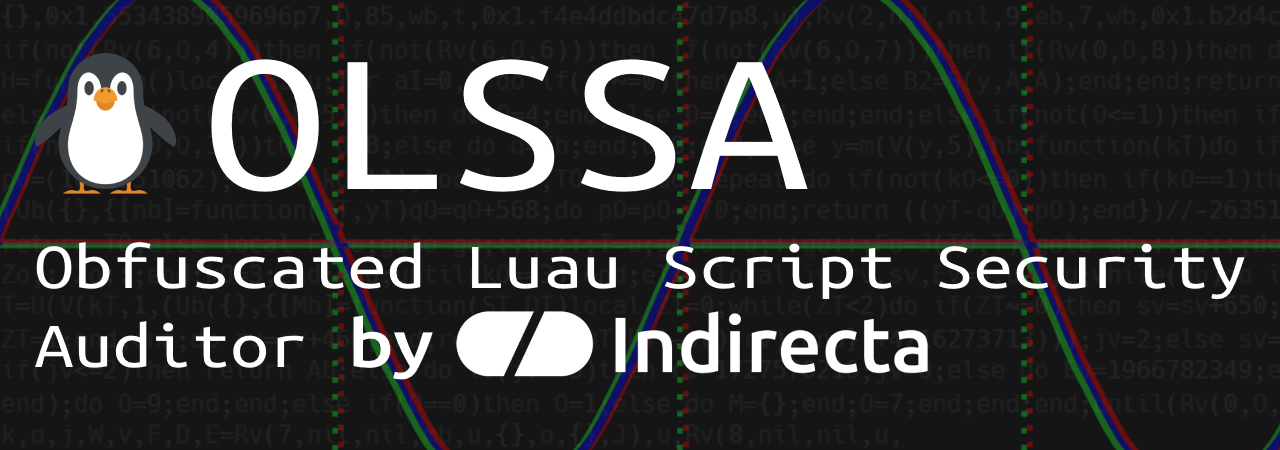
<style>
.page{position:relative;width:1280px;height:450px;background:#151515}
.page>*{position:absolute;margin:0}
.t1{font:204.9px "UbuntuMono-Regular";color:#ffffff;scale:1.18 1}
.t2{font:66.2px "UbuntuMono-Regular";color:#ffffff;scale:1.18 1}
.t3{font:66.2px "Ubuntu-Medium";color:#ffffff;scale:1.18 1}
</style>
<div class="page">
<p class="t1" style="left:211px;top:59px;width:597px;height:133px">OLSSA</p>
<p class="t2" style="left:35px;top:242px;width:1210px;height:138px">Obfuscated Luau Script Security<br>Auditor <span class="t3">by</span></p>
</div>
